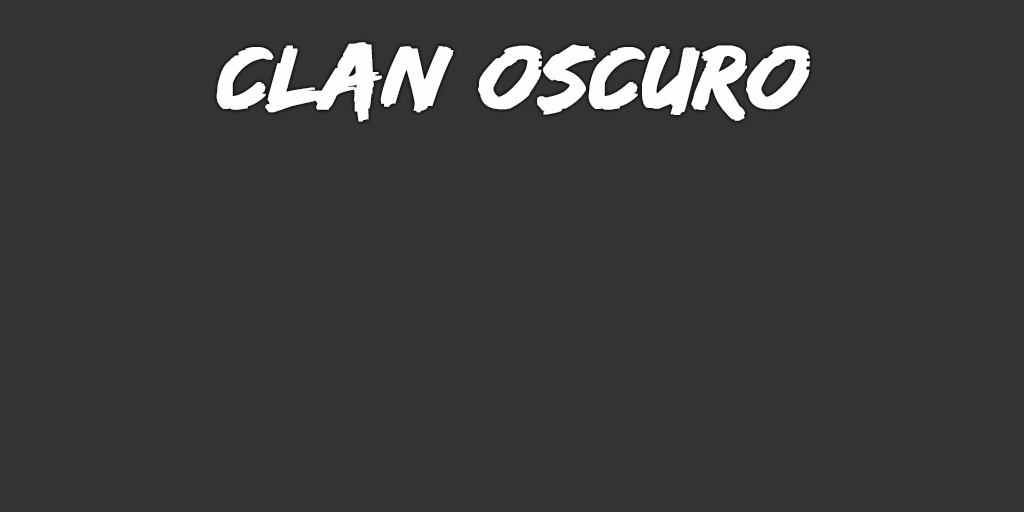
<style>
.page{position:relative;width:1024px;height:512px;background:#333333}
.page>*{position:absolute;margin:0}
.t1{font:94px "EdoSZ";color:#fefefe;font-weight:bold;font-style:italic;scale:1.04 1}
</style>
<div class="page">
<p class="t1" style="left:216px;top:42px;width:594px;height:80px">clan oscuro</p>
</div>
